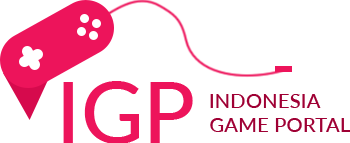
<style>
.page{position:relative;width:350px;height:143px;background:#ffffff}
.page>*{position:absolute;margin:0}
.t1{font:85.1px "Lato-Medium";color:#ed145b}
.t2{font:20.3px "Lato-Medium";color:#9f0034}
</style>
<div class="page">
<p class="t1" style="left:63px;top:81px;width:130px;height:63px">IGP</p>
<p class="t2" style="left:210px;top:94px;width:141px;height:38px">INDONESIA <br>GAME PORTAL</p>
</div>
